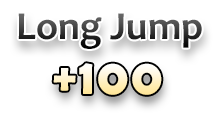
<style>
.page{position:relative;width:220px;height:120px;background:#ffffff}
.page>*{position:absolute;margin:0}
.t1{font:40px "Candara-Bold"}
.t2{font:50px "BerlinSansFBDemi-Bold";letter-spacing:0.05em}
</style>
<div class="page">
<p class="t1" style="left:18px;top:13px;width:184px;height:36px">Long Jump</p>
<p class="t2" style="left:53px;top:63px;width:109px;height:32px">+100</p>
</div>
